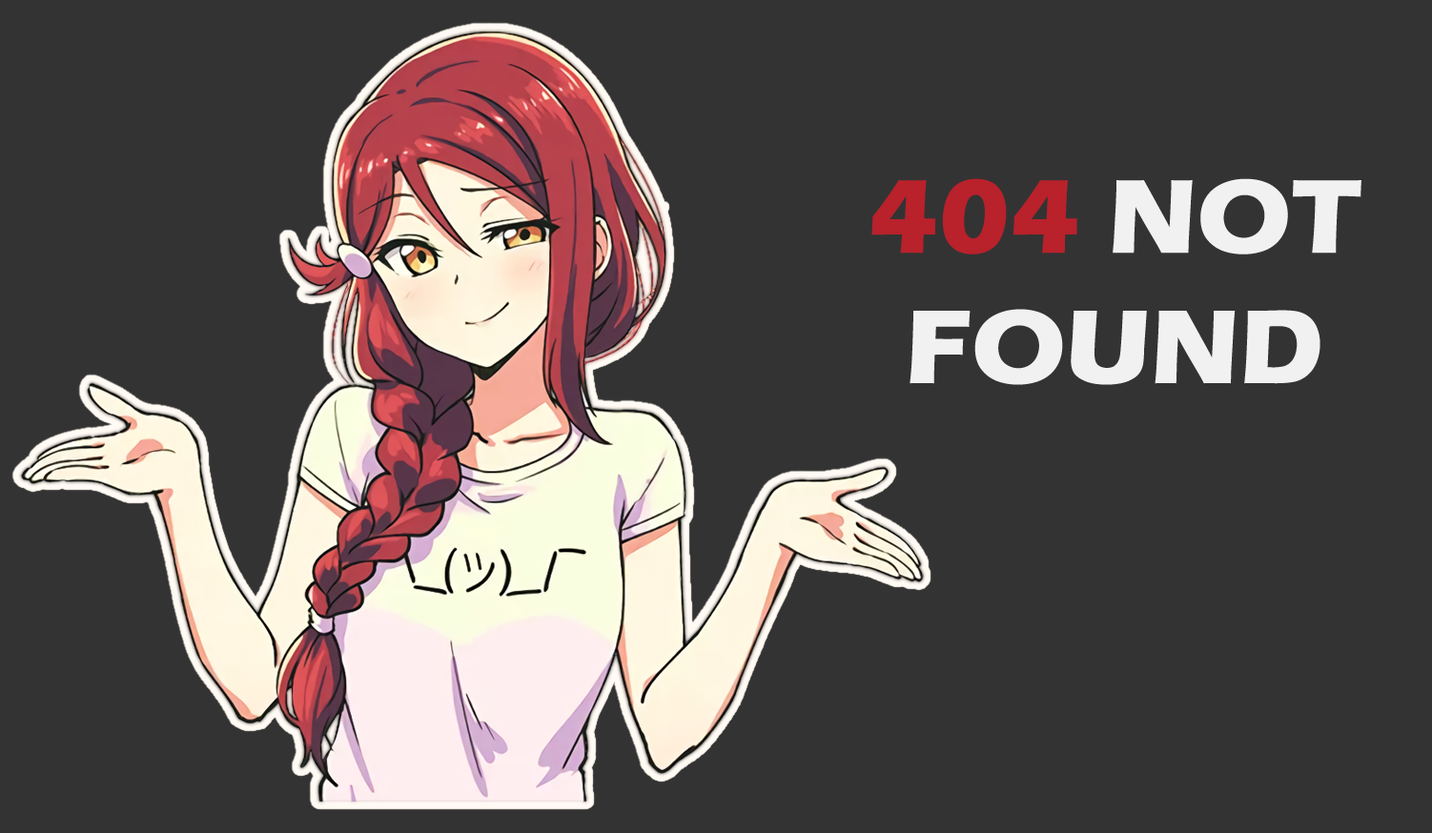
<style>
.page{position:relative;width:1432px;height:833px;background:#333333}
.page>*{position:absolute;margin:0}
.t1{font:108.7px "ErasITC-Bold";color:#f1f1f1}
.t2{font:108.7px "ErasITC-Bold";color:#b9212b}
</style>
<div class="page">
<p class="t1" style="left:871px;top:178px;width:490px;height:207px;text-align:center"><span class="t2">404</span> NOT FOUND</p>
</div>
